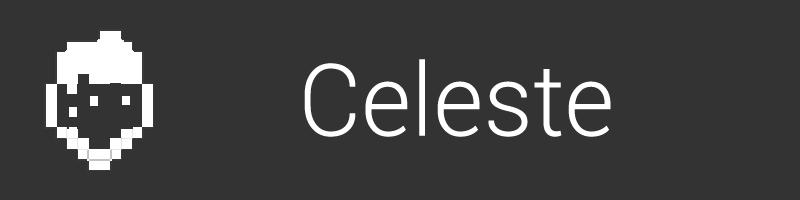
<style>
.page{position:relative;width:800px;height:200px;background:#333333}
.page>*{position:absolute;margin:0}
.t1{font:100px "Roboto-Light";color:#ffffff}
</style>
<div class="page">
<p class="t1" style="left:304px;top:59px;width:307px;height:78px">Celeste</p>
</div>
